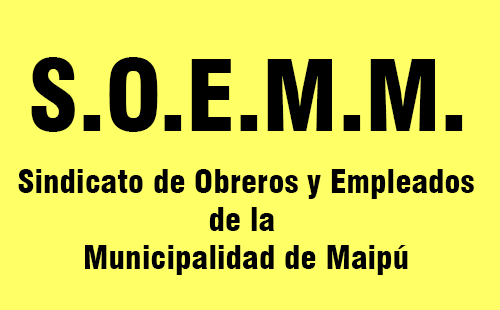
<style>
.page{position:relative;width:500px;height:310px;background:#ffff66}
.page>*{position:absolute;margin:0}
.t1{font:95.3px "Swiss721BT-BlackCondensed";letter-spacing:0.005em;color:#000000}
.t2{font:31.9px "Swiss721BT-BlackCondensed";letter-spacing:0.005em;color:#000000}
</style>
<div class="page">
<p class="t1" style="left:31px;top:57px;width:432px;height:75px">S.O.E.M.M.</p>
<p class="t2" style="left:18px;top:169px;width:456px;height:106px;text-align:center">Sindicato de Obreros y Empleados<br>de la <br>Municipalidad de Maipú</p>
</div>
